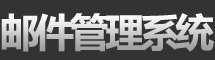
<style>
.page{position:relative;width:215px;height:60px;background:#333333}
.page>*{position:absolute;margin:0}
.t1{font:39px "MicrosoftYaHei-Bold";letter-spacing:-0.1em}
</style>
<div class="page">
<p class="t1" style="left:1px;top:13px;width:213px;height:39px">邮件管理系统</p>
</div>
